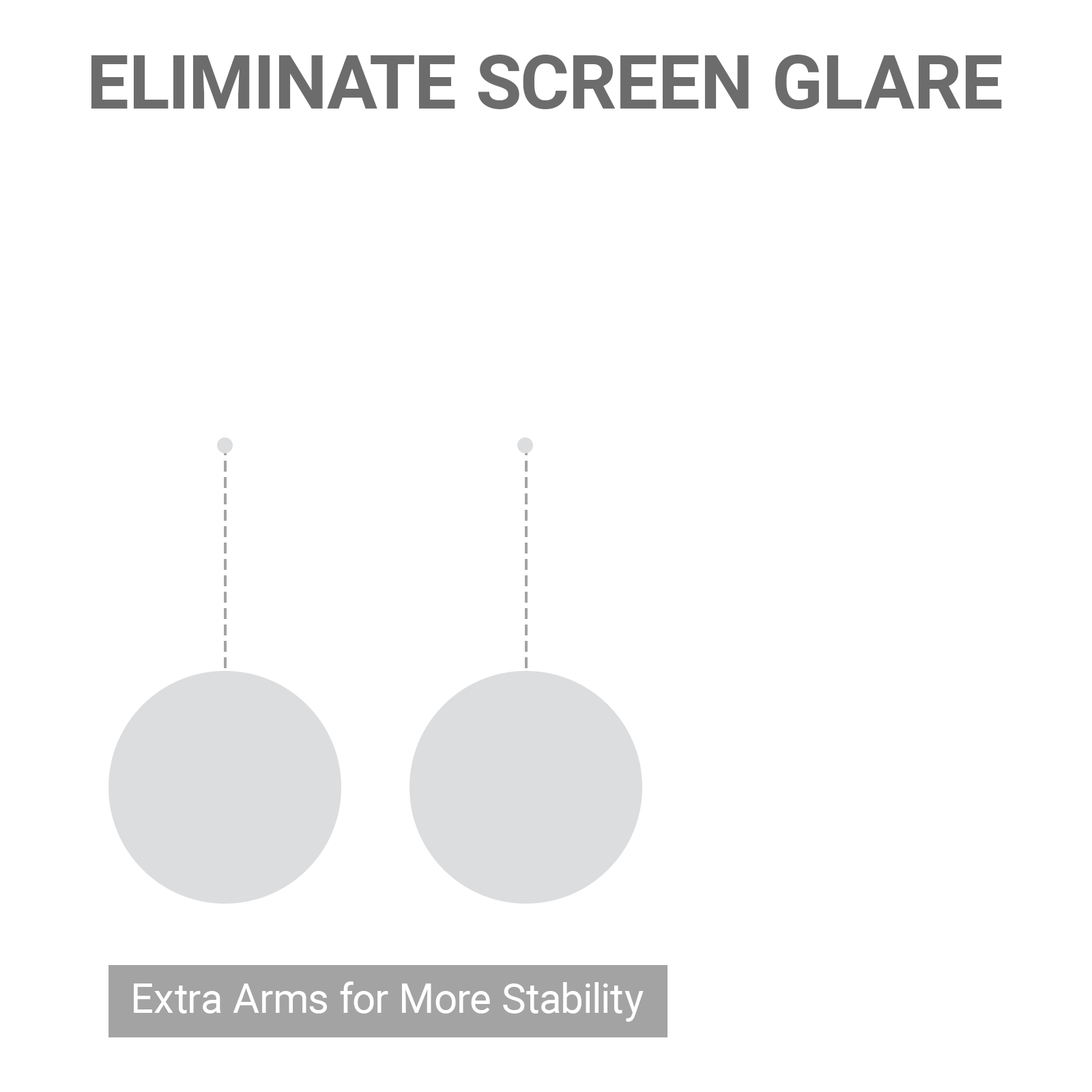
<style>
.page{position:relative;width:1092px;height:1092px;background:#ffffff}
.page>*{position:absolute;margin:0}
.t1{font:75.1px "Roboto-Bold";color:#6c6c6c}
.t2{font:40.9px "Roboto-Regular";color:#ffffff}
</style>
<div class="page">
<p class="t1" style="left:91px;top:55px;width:911px;height:54px">ELIMINATE SCREEN GLARE</p>
<p class="t2" style="left:134px;top:981px;width:510px;height:41px">Extra Arms for More Stability</p>
</div>
